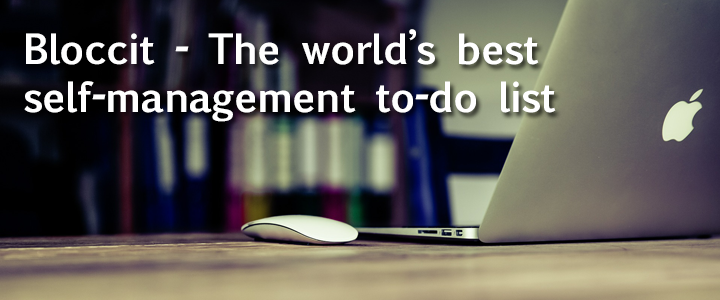
<style>
.page{position:relative;width:720px;height:300px}
.page>*{position:absolute;margin:0}
.t1{font:40px "EuphemiaUCAS-Bold";letter-spacing:-0.02em;color:#ffffff}
</style>
<div class="page">
<p class="t1" style="left:24px;top:29px;width:532px;height:93px">Bloccit - The world’s best self-management to-do list</p>
</div>
